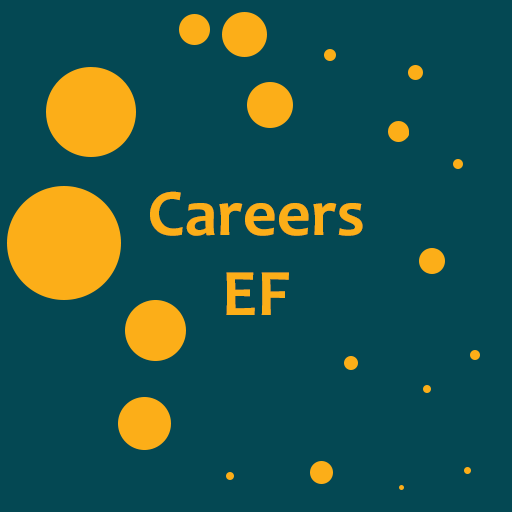
<style>
.page{position:relative;width:512px;height:512px;background:#044853}
.page>*{position:absolute;margin:0}
.t1{font:66.7px "Candara-Bold";color:#fcae18}
</style>
<div class="page">
<p class="t1" style="left:150px;top:191px;width:213px;height:124px;text-align:center">Careers <br>EF</p>
</div>
